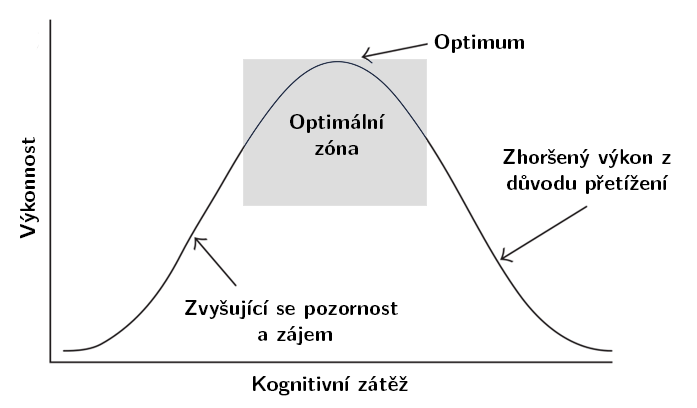
<style>
.page{position:relative;width:697px;height:408px;background:#ffffff}
.page>*{position:absolute;margin:0}
.t1{font:21.3px "LMSans10-Bold";color:#000000}
</style>
<div class="page">
<p class="t1" style="left:434px;top:34px;width:90px;height:19px">Optimum</p>
<p class="t1" style="left:290px;top:114px;width:95px;height:41px;text-align:center">Optimální <br>zóna</p>
<p class="t1" style="left:20px;top:137px;width:19px;height:102px;rotate:-90deg">Výkonnost</p>
<p class="t1" style="left:503px;top:149px;width:168px;height:45px;text-align:center">Zhoršený výkon z<br>důvodu přetížení</p>
<p class="t1" style="left:185px;top:300px;width:213px;height:45px;text-align:center">Zvyšující se pozornost <br>a zájem</p>
<p class="t1" style="left:253px;top:376px;width:155px;height:20px">Kognitivní zátěž</p>
</div>
